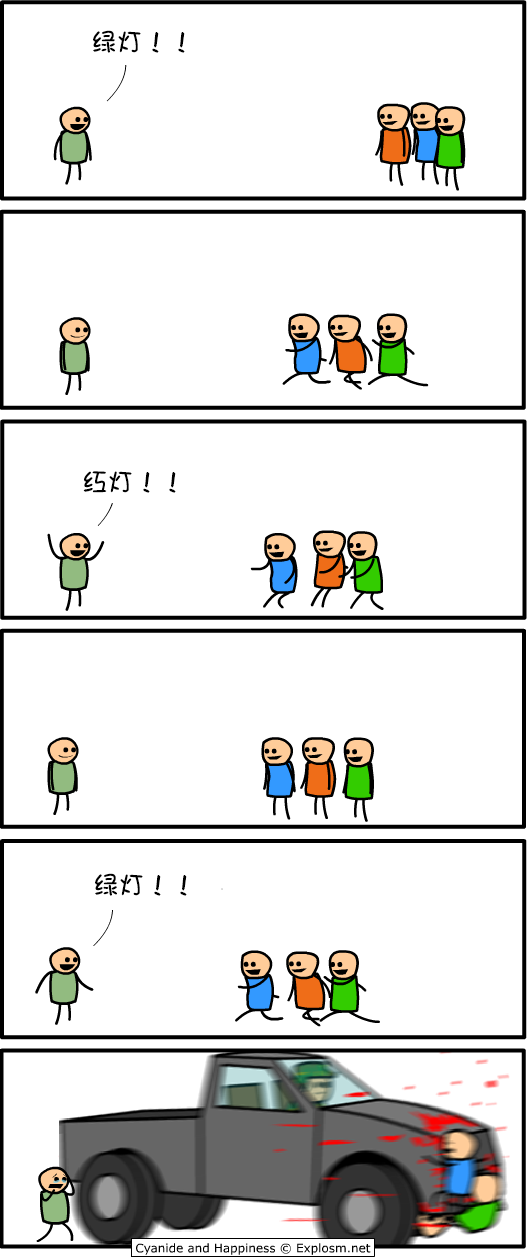
<style>
.page{position:relative;width:528px;height:1258px;background:#ffffff}
.page>*{position:absolute;margin:0}
.t1{font:26px "DFGirl";color:#000000}
</style>
<div class="page">
<p class="t1" style="left:93px;top:30px;width:92px;height:23px">绿灯！！</p>
<p class="t1" style="left:83px;top:471px;width:93px;height:22px">红灯！！</p>
<p class="t1" style="left:95px;top:873px;width:92px;height:23px">绿灯！！</p>
</div>
